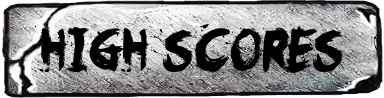
<style>
.page{position:relative;width:384px;height:98px}
.page>*{position:absolute;margin:0}
.t1{font:55px "OhNo";color:#010101}
</style>
<div class="page">
<p class="t1" style="left:34px;top:23px;width:313px;height:55px">HIGH SCORES</p>
</div>
